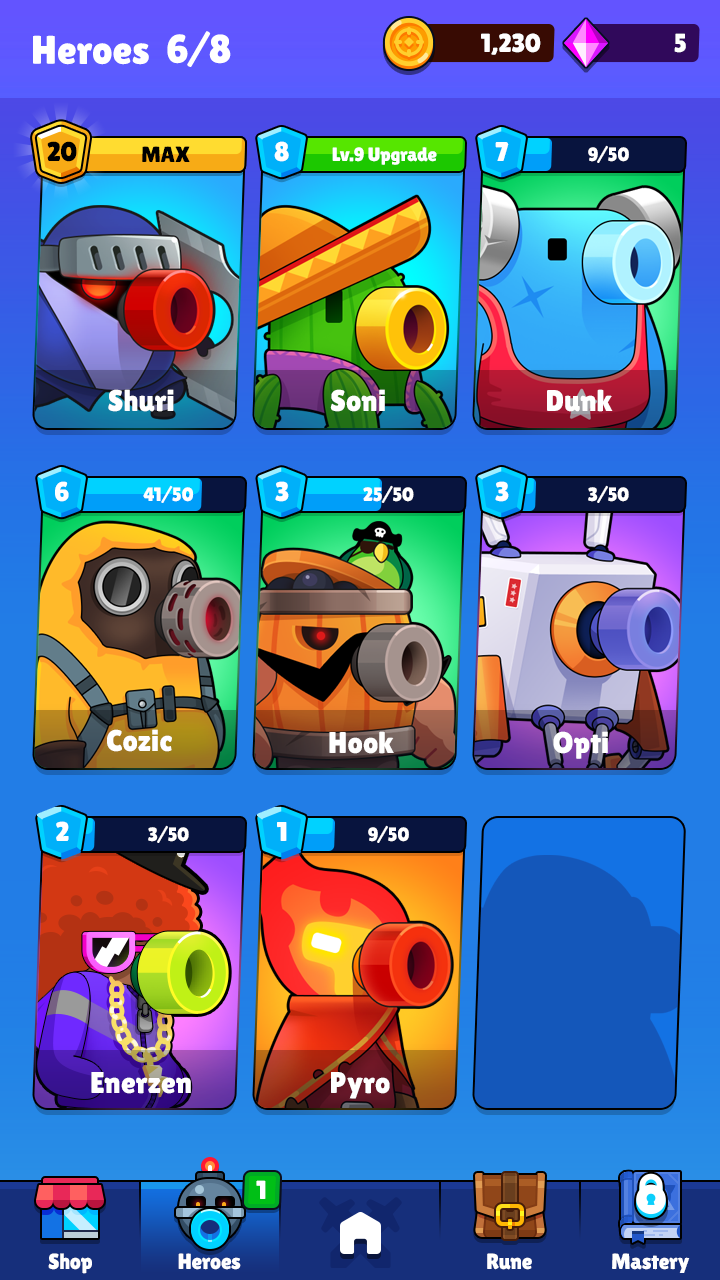
<style>
.page{position:relative;width:720px;height:1280px}
.page>*{position:absolute;margin:0}
.t1{font:40px "LilitaOne";color:#ffffff}
.t2{font:26px "LilitaOne";letter-spacing:-0.01em;color:#ffffff;text-transform:uppercase}
.t3{font:27.2px "LilitaOne";color:#000000;text-transform:uppercase}
.t4{font:22px "LilitaOne";color:#000000;text-transform:uppercase}
.t5{font:27.2px "LilitaOne";color:#ffffff;text-transform:uppercase}
.t6{font:19.2px "LilitaOne";color:#ffffff}
.t7{font:19.2px "LilitaOne";color:#ffffff;text-transform:uppercase}
.t8{font:30px "LilitaOne";color:#ffffff}
.t9{font:26px "LilitaOne";color:#ffffff;text-transform:uppercase}
.t10{font:22px "LilitaOne";color:#ffffff}
</style>
<div class="page">
<p class="t1" style="left:33px;top:35px;width:116px;height:30px">Heroes</p>
<p class="t1" style="left:167px;top:31px;width:64px;height:36px">6/8</p>
<p class="t2" style="left:481px;top:33px;width:60px;height:22px">1,230</p>
<p class="t2" style="left:674px;top:33px;width:12px;height:20px">5</p>
<p class="t3" style="left:47px;top:141px;width:30px;height:21px">20</p>
<p class="t4" style="left:142px;top:146px;width:48px;height:16px">Max</p>
<p class="t5" style="left:274px;top:141px;width:15px;height:21px">8</p>
<p class="t6" style="left:332px;top:147px;width:105px;height:18px">Lv.9 Upgrade</p>
<p class="t5" style="left:495px;top:142px;width:14px;height:19px">7</p>
<p class="t7" style="left:588px;top:145px;width:41px;height:18px">9/50</p>
<p class="t8" style="left:108px;top:389px;width:66px;height:23px">Shuri</p>
<p class="t8" style="left:330px;top:389px;width:55px;height:23px">Soni</p>
<p class="t8" style="left:547px;top:389px;width:66px;height:23px">Dunk</p>
<p class="t5" style="left:55px;top:481px;width:14px;height:21px">6</p>
<p class="t7" style="left:143px;top:485px;width:51px;height:18px">41/50</p>
<p class="t5" style="left:275px;top:481px;width:14px;height:21px">3</p>
<p class="t7" style="left:363px;top:485px;width:51px;height:18px">25/50</p>
<p class="t5" style="left:495px;top:481px;width:14px;height:21px">3</p>
<p class="t7" style="left:588px;top:485px;width:41px;height:18px">3/50</p>
<p class="t8" style="left:107px;top:729px;width:65px;height:23px">Cozic</p>
<p class="t8" style="left:329px;top:731px;width:65px;height:23px">Hook</p>
<p class="t8" style="left:553px;top:731px;width:55px;height:28px">Opti</p>
<p class="t5" style="left:56px;top:821px;width:13px;height:20px">2</p>
<p class="t5" style="left:277px;top:822px;width:10px;height:19px">1</p>
<p class="t7" style="left:148px;top:825px;width:41px;height:18px">3/50</p>
<p class="t7" style="left:368px;top:825px;width:41px;height:18px">9/50</p>
<p class="t8" style="left:91px;top:1072px;width:100px;height:22px">Enerzen</p>
<p class="t8" style="left:331px;top:1072px;width:59px;height:27px">Pyro</p>
<p class="t9" style="left:256px;top:1180px;width:10px;height:19px">1</p>
<p class="t10" style="left:48px;top:1253px;width:44px;height:21px">Shop</p>
<p class="t10" style="left:178px;top:1253px;width:63px;height:17px">Heroes</p>
<p class="t10" style="left:487px;top:1253px;width:45px;height:17px">Rune</p>
<p class="t10" style="left:612px;top:1253px;width:78px;height:20px">Mastery</p>
</div>
